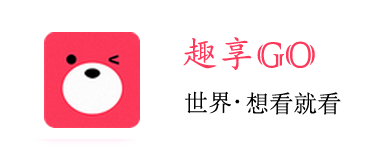
<style>
.page{position:relative;width:380px;height:154px;background:#ffffff}
.page>*{position:absolute;margin:0}
.t1{font:36px "KaiTi";color:#fc395a}
.t2{font:48px "ColonnaMT";color:#fc395a}
.t3{font:24px "SimSun";color:#000000}
.t4{font:16px "SimSun";color:#010101}
</style>
<div class="page">
<p class="t1" style="left:183px;top:37px;width:69px;height:33px">趣享</p>
<p class="t2" style="left:257px;top:41px;width:58px;height:27px">GO</p>
<p class="t3" style="left:184px;top:91px;width:47px;height:23px">世界</p>
<p class="t4" style="left:235px;top:99px;width:5px;height:5px">·</p>
<p class="t3" style="left:246px;top:92px;width:95px;height:23px">想看就看</p>
</div>
